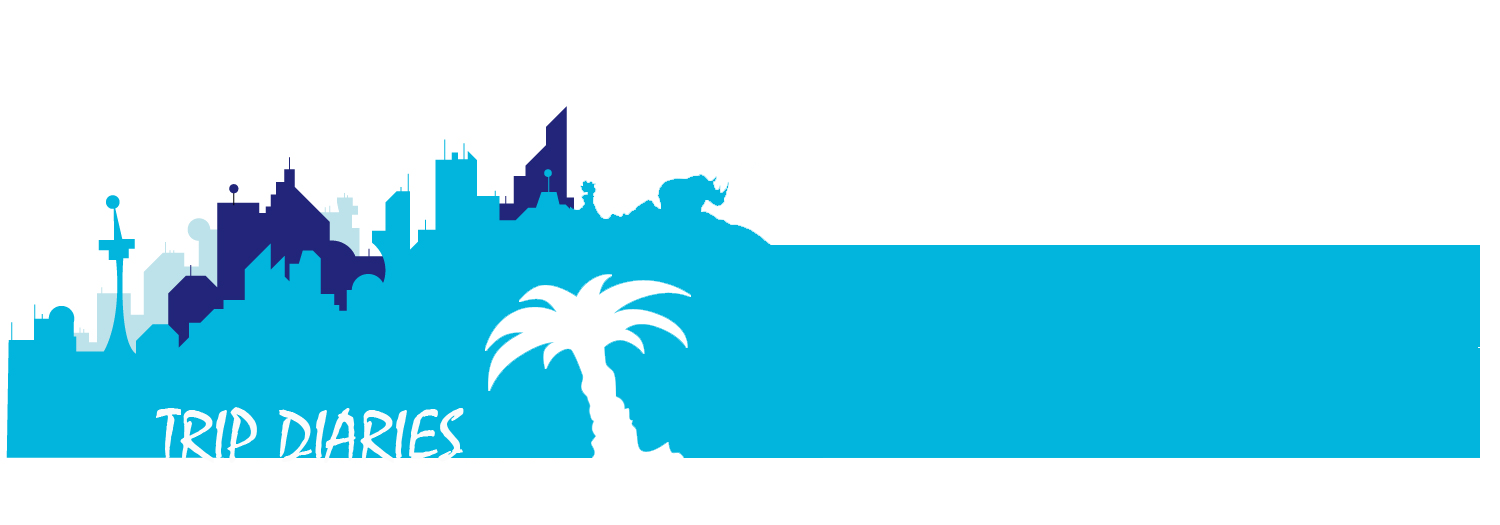
<style>
.page{position:relative;width:1500px;height:525px;background:#ffffff}
.page>*{position:absolute;margin:0}
.t1{font:72px "Mistral";color:#fbfbfb}
</style>
<div class="page">
<p class="t1" style="left:156px;top:407px;width:308px;height:56px">TRIP DIARIES</p>
</div>
